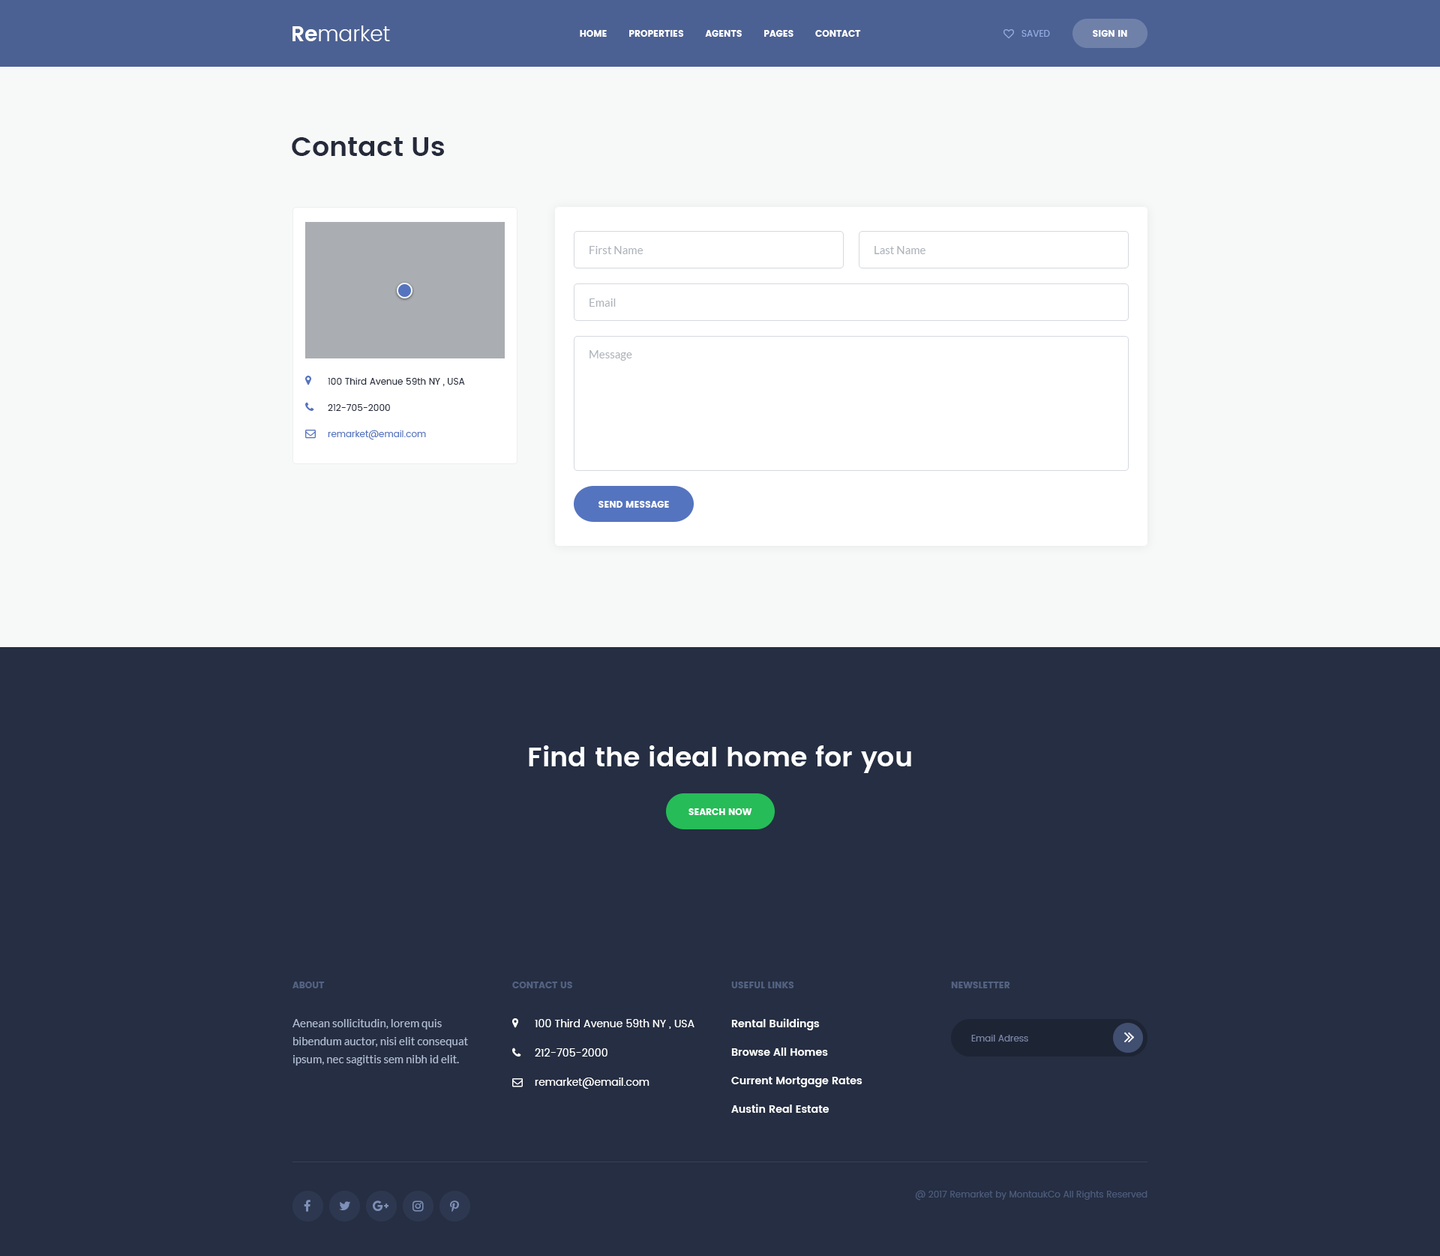
<style>
.page{position:relative;width:1440px;height:1256px;background:#252e42}
.page>*{position:absolute;margin:0}
.t1{font:21px "Poppins-Light";color:#ffffff}
.t2{font:21px "Poppins-SemiBold";color:#ffffff}
.t3{font:9px "Poppins";color:#ffffff;text-transform:uppercase}
.t4{font:9px "Poppins-Regular";color:#93ace2;text-transform:uppercase}
.t5{font:27px "Poppins-SemiBold";color:#242a3a}
.t6{font:11.2px "Lato-Regular";color:#adb3ba}
.t7{font:9px "Poppins-Regular";color:#242a3a}
.t8{font:9px "Poppins-Regular";color:#5574bf}
.t9{font:27px "Poppins-SemiBold";color:#ffffff}
.t10{font:9px "Poppins";color:#536282;text-transform:uppercase}
.t11{font:11.2px/18px "Lato-Regular";color:#b2bdd5}
.t12{font:10.5px "Poppins-Regular";color:#ffffff}
.t13{font:10.5px/28.5px "Poppins-SemiBold";color:#ffffff}
.t14{font:9px "Poppins-Regular";color:#7784a2}
.t15{font:9px "Poppins-Regular";color:#4d5b7c}
</style>
<div class="page">
<p class="t1" style="left:292px;top:26px;width:98px;height:15px"><span class="t2">Re</span>market</p>
<p class="t3" style="left:580px;top:30px;width:281px;height:7px">Home        Properties        Agents        Pages        Contact</p>
<p class="t4" style="left:1022px;top:30px;width:28px;height:7px">Saved</p>
<p class="t3" style="left:1093px;top:30px;width:34px;height:7px">Sign In</p>
<p class="t5" style="left:292px;top:137px;width:152px;height:19px">Contact Us</p>
<p class="t6" style="left:590px;top:246px;width:54px;height:8px">First Name</p>
<p class="t6" style="left:874px;top:246px;width:52px;height:8px">Last Name</p>
<p class="t6" style="left:590px;top:298px;width:26px;height:9px">Email</p>
<p class="t6" style="left:590px;top:350px;width:42px;height:11px">Message</p>
<p class="t7" style="left:328px;top:378px;width:137px;height:8px">100 Third Avenue 59th NY , USA</p>
<p class="t7" style="left:328px;top:404px;width:62px;height:7px">212-705-2000</p>
<p class="t8" style="left:328px;top:430px;width:98px;height:10px">remarket@email.com</p>
<p class="t3" style="left:598px;top:501px;width:71px;height:7px">Send Message</p>
<p class="t9" style="left:529px;top:746px;width:382px;height:27px">Find the ideal home for you</p>
<p class="t3" style="left:688px;top:808px;width:64px;height:7px">Search Now</p>
<p class="t10" style="left:292px;top:982px;width:33px;height:6px">About</p>
<p class="t10" style="left:512px;top:982px;width:60px;height:6px">Contact Us</p>
<p class="t10" style="left:731px;top:982px;width:63px;height:6px">Useful Links</p>
<p class="t10" style="left:951px;top:982px;width:59px;height:6px">Newsletter</p>
<p class="t11" style="left:292px;top:1019px;width:176px;height:47px">Aenean sollicitudin, lorem quis bibendum auctor, nisi elit consequat ipsum, nec sagittis sem nibh id elit.</p>
<p class="t12" style="left:535px;top:1019px;width:159px;height:10px">100 Third Avenue 59th NY , USA</p>
<p class="t13" style="left:731px;top:1018px;width:131px;height:95px">Rental Buildings<br>Browse All Homes<br>Current Mortgage Rates<br>Austin Real Estate</p>
<p class="t14" style="left:971px;top:1035px;width:57px;height:7px">Email Adress</p>
<p class="t12" style="left:535px;top:1048px;width:73px;height:9px">212-705-2000</p>
<p class="t12" style="left:535px;top:1078px;width:115px;height:11px">remarket@email.com</p>
<p class="t15" style="left:915px;top:1190px;width:233px;height:11px">@ 2017 Remarket by MontaukCo All Rights Reserved</p>
</div>
